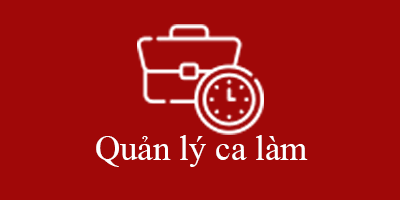
<style>
.page{position:relative;width:400px;height:200px;background:#a00808}
.page>*{position:absolute;margin:0}
.t1{font:35px "TimesNewRomanPSMT";color:#ffffff}
</style>
<div class="page">
<p class="t1" style="left:96px;top:135px;width:212px;height:32px">Quản lý ca làm</p>
</div>
